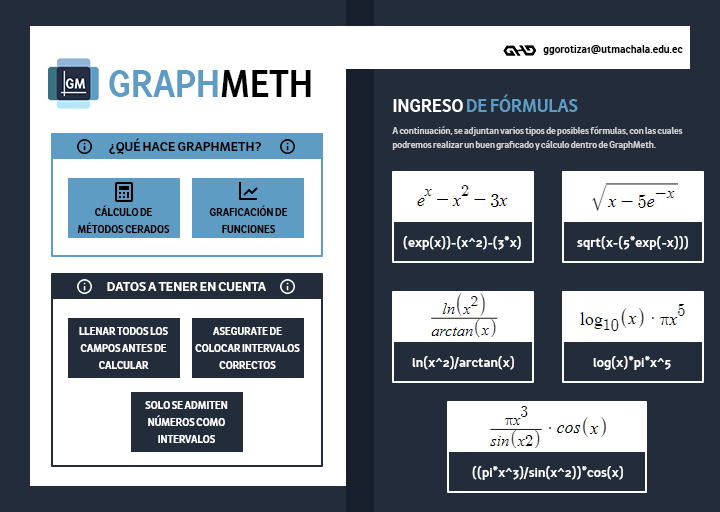
<style>
.page{position:relative;width:720px;height:512px;background:#232c3b}
.page>*{position:absolute;margin:0}
.t1{font:14px "AwanZaman-Bold";color:#000000}
.t2{font:48px "AwanZaman-Bold";color:#5e9cc4}
.t3{font:48px "AwanZaman-Bold";color:#000000}
.t4{font:24px "AwanZaman-Bold";color:#5e9cc4}
.t5{font:24px "AwanZaman-Bold";color:#ffffff}
.t6{font:12px "AwanZaman-Bold";color:#cecece}
.t7{font:18px "AwanZaman-Bold";color:#000000}
.t8{font:18px "AwanZaman-Bold";color:#ffffff}
.t9{font:14px "AwanZaman-Bold";color:#ffffff}
</style>
<div class="page">
<p class="t1" style="left:543px;top:45px;width:140px;height:10px">ggorotiza1@utmachala.edu.ec</p>
<p class="t2" style="left:109px;top:70px;width:202px;height:27px">GRAPH<span class="t3">METH</span></p>
<p class="t4" style="left:393px;top:94px;width:185px;height:18px"><span class="t5">INGRESO</span> DE FÓRMULAS</p>
<p class="t6" style="left:392px;top:126px;width:291px;height:24px">A continuación, se adjuntan varios tipos de posibles fórmulas, con las cuales <br>podremos realizar un buen graficado y cálculo dentro de GraphMeth.</p>
<p class="t7" style="left:109px;top:138px;width:153px;height:16px">¿QUÉ HACE GRAPHMETH?</p>
<p class="t1" style="left:77px;top:205px;width:93px;height:28px;text-align:center">CÁLCULO DE<br>MÉTODOS CERADOS</p>
<p class="t1" style="left:209px;top:205px;width:79px;height:28px;text-align:center">GRAFICACIÓN DE<br>FUNCIONES</p>
<p class="t8" style="left:403px;top:236px;width:118px;height:14px">(exp(x))-(x^2)-(3*x)</p>
<p class="t8" style="left:577px;top:236px;width:111px;height:14px">sqrt(x-(5*exp(-x)))</p>
<p class="t8" style="left:107px;top:282px;width:159px;height:9px">DATOS A TENER EN CUENTA</p>
<p class="t9" style="left:79px;top:327px;width:89px;height:42px;text-align:center">LLENAR TODOS LOS<br>CAMPOS ANTES DE<br>CALCULAR</p>
<p class="t9" style="left:195px;top:327px;width:105px;height:42px;text-align:center">ASEGURATE DE<br>COLOCAR INTERVALOS<br>CORRECTOS</p>
<p class="t8" style="left:412px;top:356px;width:102px;height:14px">ln(x^2)/arctan(x)</p>
<p class="t8" style="left:593px;top:356px;width:78px;height:14px">log(x)*pi*x^5</p>
<p class="t9" style="left:145px;top:401px;width:83px;height:42px;text-align:center">SOLO SE ADMITEN<br>NÚMEROS COMO<br>INTERVALOS</p>
<p class="t8" style="left:472px;top:466px;width:151px;height:14px">((pi*x^3)/sin(x^2))*cos(x)</p>
</div>
